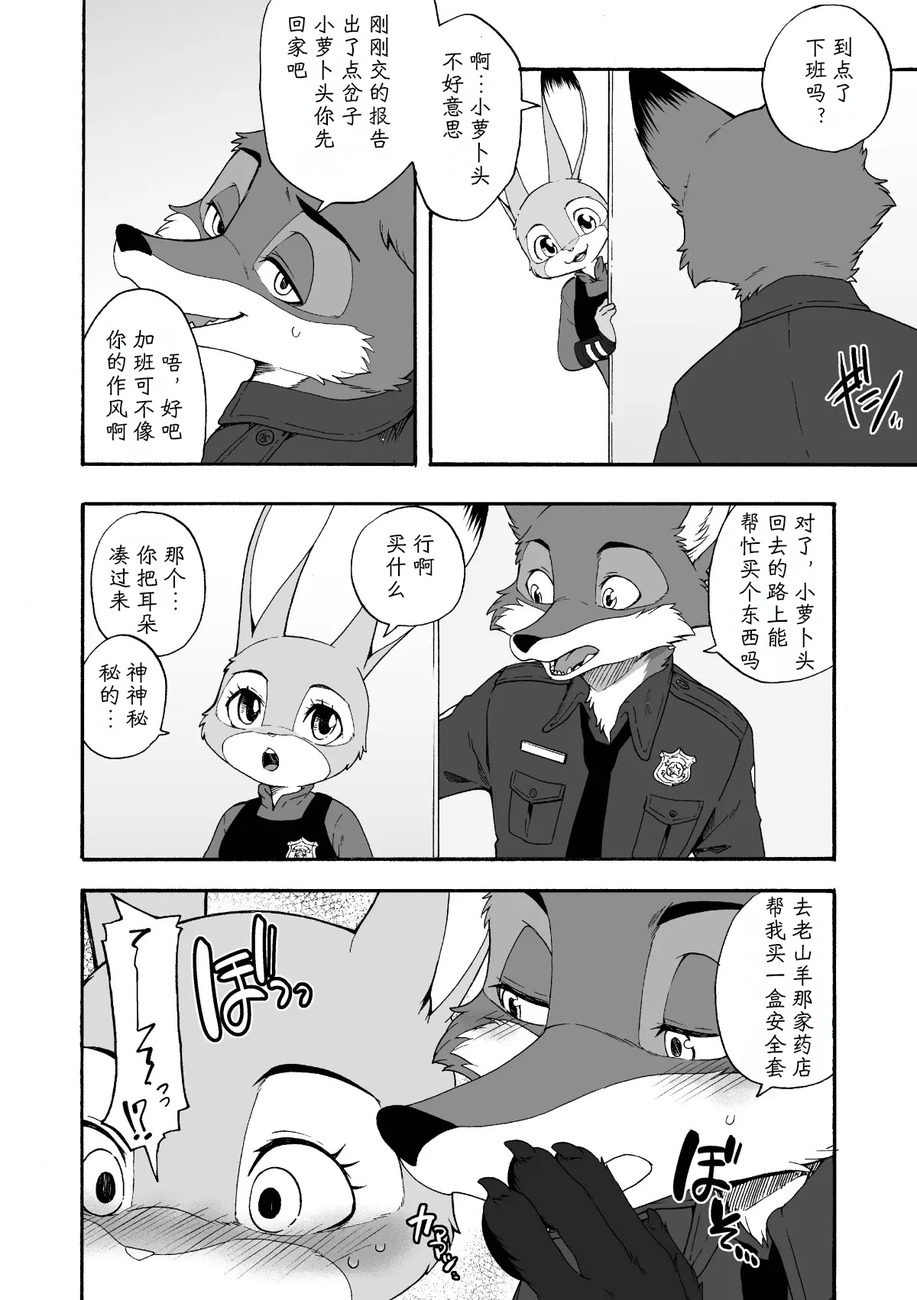
<style>
.page{position:relative;width:917px;height:1300px;background:#ffffff}
.page>*{position:absolute;margin:0}
.t1{font:22.9px/27.5px "HYShiWei55U";color:#000000}
</style>
<div class="page">
<p class="t1" style="left:287px;top:14px;width:103px;height:134px">刚刚交的报告<br>出了点岔子<br>小萝卜头你先<br>回家吧</p>
<p class="t1" style="left:805px;top:37px;width:48px;height:86px">到点了<br>下班吗？</p>
<p class="t1" style="left:442px;top:52px;width:49px;height:133px">啊…小萝卜头<br>不好意思</p>
<p class="t1" style="left:105px;top:329px;width:78px;height:113px">唔，好吧<br>加班可不像<br>你的作风啊</p>
<p class="t1" style="left:739px;top:512px;width:76px;height:159px">对了，小萝卜头<br>回去的路上能<br>帮忙买个东西吗</p>
<p class="t1" style="left:109px;top:545px;width:77px;height:90px">那个…<br>你把耳朵<br>凑过来</p>
<p class="t1" style="left:386px;top:534px;width:49px;height:64px">行啊<br>买什么</p>
<p class="t1" style="left:99px;top:662px;width:49px;height:66px">神神秘<br>秘的…</p>
<p class="t1" style="left:764px;top:896px;width:50px;height:182px">去老山羊那家药店<br>帮我买一盒安全套</p>
</div>
